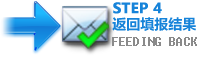
<style>
.page{position:relative;width:197px;height:57px;background:#ffffff}
.page>*{position:absolute;margin:0}
.t1{font:14px/16px "MicrosoftYaHei-Bold";color:#1683d9;font-weight:bold}
.t2{font:14px/16px "MicrosoftYaHei-Bold";color:#1683d9}
.t3{font:14px "Fixedsys";letter-spacing:-0.06em;color:#8a8a8a}
</style>
<div class="page">
<p class="t1" style="left:112px;top:2px;width:84px;height:29px">STEP 4<br><span class="t2"> 返回填报结果</span></p>
<p class="t3" style="left:112px;top:37px;width:85px;height:9px">FEEDING BACK</p>
</div>
